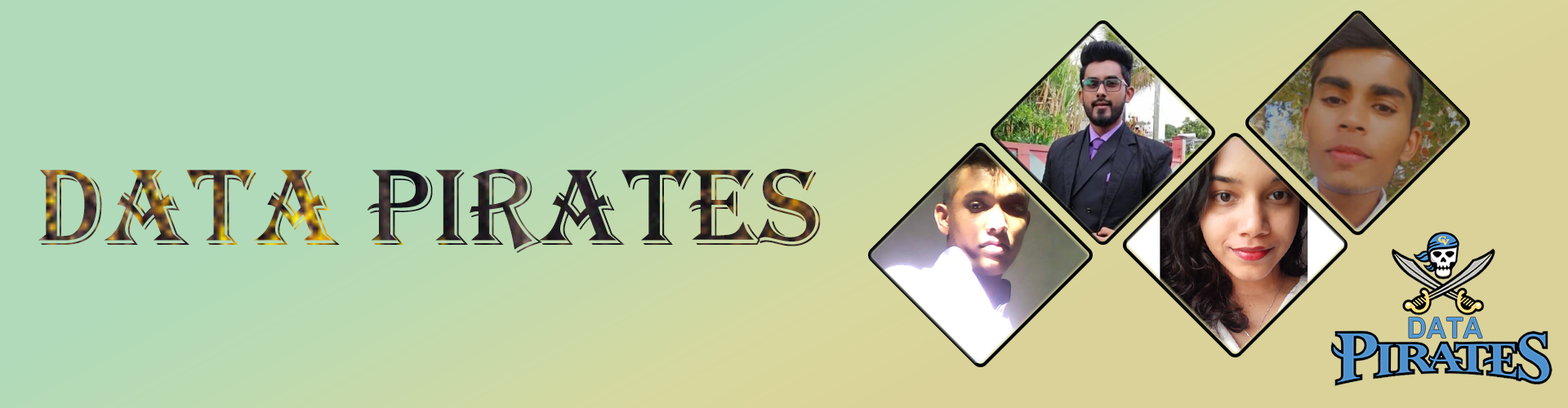
<style>
.page{position:relative;width:1568px;height:408px}
.page>*{position:absolute;margin:0}
.t1{font:112.3px "Algerian"}
</style>
<div class="page">
<p class="t1" style="left:38px;top:168px;width:783px;height:85px">Data Pirates</p>
</div>
